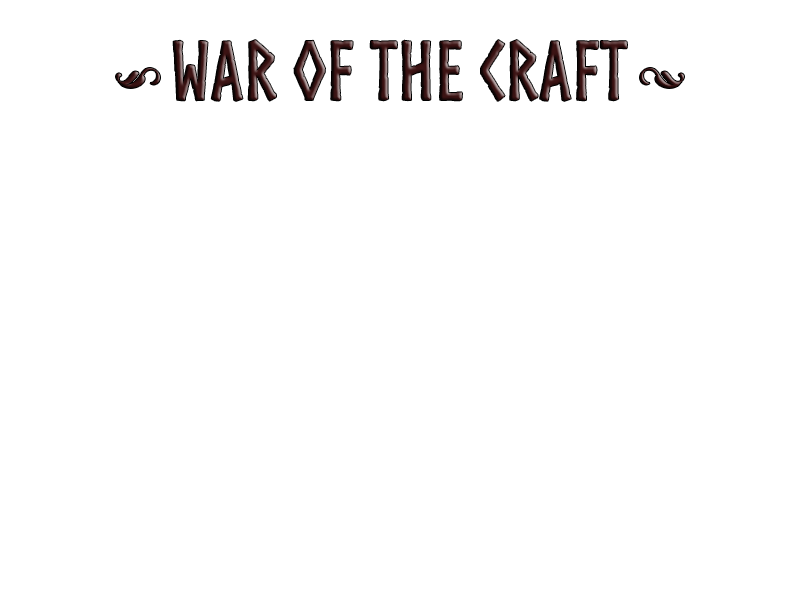
<style>
.page{position:relative;width:800px;height:600px;background:#ffffff}
.page>*{position:absolute;margin:0}
.t1{font:80px "Norse-Bold"}
</style>
<div class="page">
<p class="t1" style="left:173px;top:40px;width:454px;height:61px">War of the Craft</p>
</div>
